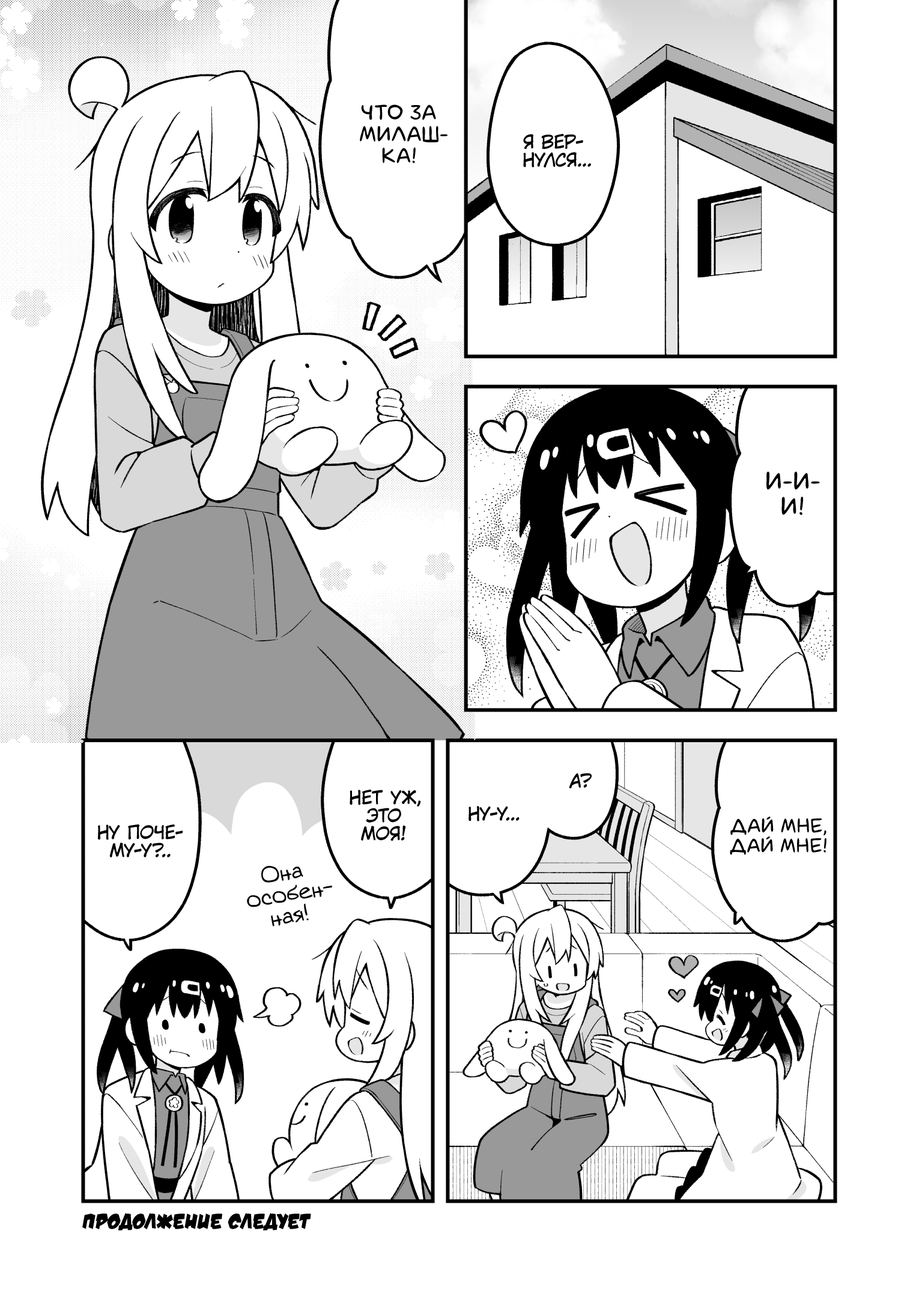
<style>
.page{position:relative;width:919px;height:1297px;background:#ffffff}
.page>*{position:absolute;margin:0}
.t1{font:21.6px "laCartoonerie";color:#000000;text-transform:uppercase}
.t2{font:18px "KuraiVoice2";color:#000000;text-transform:uppercase}
.t3{font:25.2px "laCartoonerie";color:#000000;text-transform:uppercase}
.t4{font:19.8px "laCartoonerie";color:#000000;text-transform:uppercase}
.t5{font:21.6px "v_Augie";color:#000000}
.t6{font:21.6px "v_DamnNoisyKids";color:#000000;text-transform:uppercase}
</style>
<div class="page">
<p class="t1" style="left:360px;top:105px;width:88px;height:58px;text-align:center">Что за<br>милаш-<br>ка!</p>
<p class="t2" style="left:523px;top:134px;width:68px;height:34px;text-align:center">Я вер-<br>нулся...</p>
<p class="t3" style="left:766px;top:472px;width:54px;height:43px;text-align:center">И-и-<br>и!</p>
<p class="t2" style="left:569px;top:773px;width:23px;height:16px">А?</p>
<p class="t2" style="left:350px;top:790px;width:71px;height:51px;text-align:center">Нет уж,<br>это<br>моя!</p>
<p class="t2" style="left:469px;top:806px;width:51px;height:16px">Ну-у...</p>
<p class="t4" style="left:730px;top:817px;width:97px;height:38px;text-align:center">Дай мне,<br>дай мне!</p>
<p class="t2" style="left:98px;top:824px;width:85px;height:34px;text-align:center">Ну поче-<br>му-у?..</p>
<p class="t5" style="left:247px;top:866px;width:85px;height:61px;text-align:center;rotate:-9deg">Она<br>особен-<br>ная!</p>
<p class="t6" style="left:82px;top:1213px;width:229px;height:18px">Продолжение следует</p>
</div>
